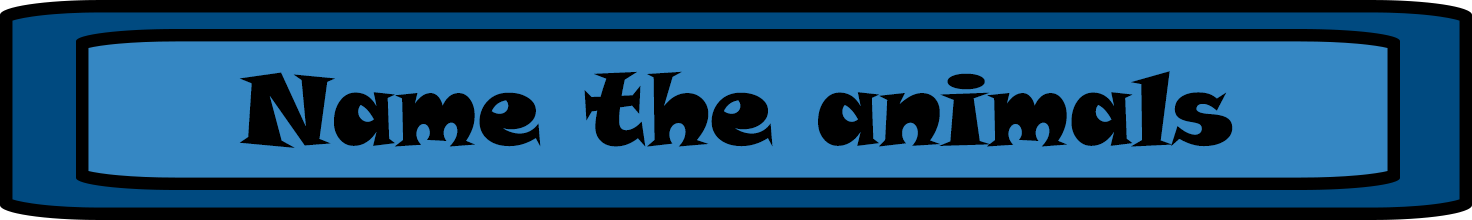
<style>
.page{position:relative;width:1472px;height:220px;background:#3587c3}
.page>*{position:absolute;margin:0}
.t1{font:100px "SnapITC-Regular";color:#000000}
</style>
<div class="page">
<p class="t1" style="left:239px;top:71px;width:994px;height:77px">Name the animals</p>
</div>
